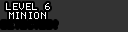
<style>
.page{position:relative;width:128px;height:32px;background:#333333}
.page>*{position:absolute;margin:0}
.t1{font:8px "Terminal";letter-spacing:0.05em;color:#ffffff}
</style>
<div class="page">
<p class="t1" style="left:6px;top:3px;width:44px;height:7px">LEVEL 6</p>
<p class="t1" style="left:9px;top:12px;width:37px;height:7px">MINION</p>
</div>
